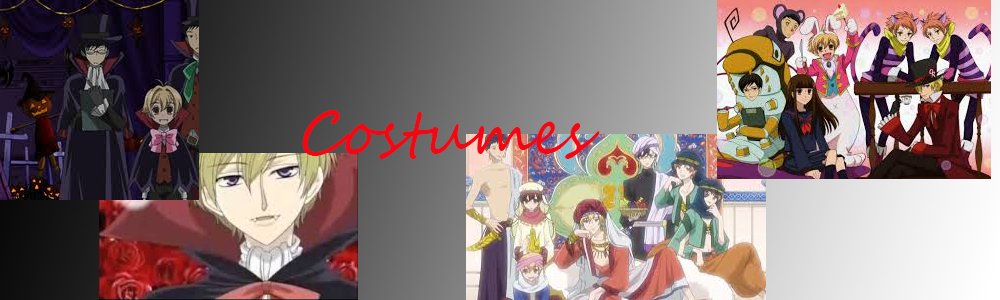
<style>
.page{position:relative;width:1000px;height:300px}
.page>*{position:absolute;margin:0}
.t1{font:60px "SegoeScript";color:#f30712}
</style>
<div class="page">
<p class="t1" style="left:302px;top:110px;width:298px;height:49px">Costumes</p>
</div>
